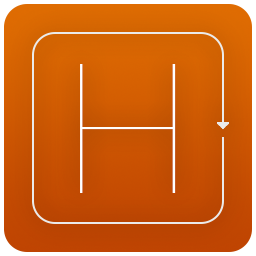
<style>
.page{position:relative;width:256px;height:256px}
.page>*{position:absolute;margin:0}
.t1{font:184px "Lato-Hairline";letter-spacing:0.025em;color:#ffffff}
</style>
<div class="page">
<p class="t1" style="left:80px;top:64px;width:96px;height:129px">H</p>
</div>
